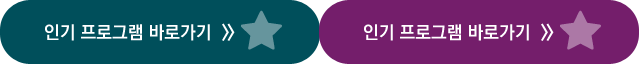
<style>
.page{position:relative;width:640px;height:64px;background:#004f5b}
.page>*{position:absolute;margin:0}
.t1{font:18px "KoPubDotumBold";color:#ffffff}
.t2{font:18px "KoPubDotumBold";letter-spacing:-0.12em;color:#ffffff}
</style>
<div class="page">
<p class="t1" style="left:45px;top:23px;width:190px;height:18px">인기 프로그램 바로가기  <span class="t2">&gt;&gt;</span></p>
<p class="t1" style="left:364px;top:23px;width:190px;height:18px">인기 프로그램 바로가기  <span class="t2">&gt;&gt;</span></p>
</div>
